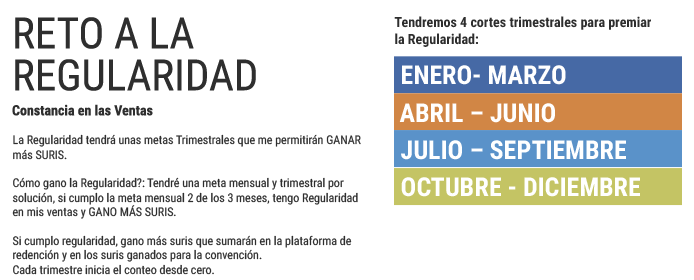
<style>
.page{position:relative;width:694px;height:280px;background:#ffffff}
.page>*{position:absolute;margin:0}
.t1{font:14px/25px "RobotoCondensed-Bold";color:#2a2a2a}
.t2{font:43px/42px "RobotoCondensed-Regular";color:#2a2a2a;text-transform:uppercase}
.t3{font:14px "RobotoCondensed-Bold";color:#2a2a2a}
.t4{font:26px "RobotoCondensed-Bold";color:#ffffff;text-transform:uppercase}
.t5{font:12px "RobotoCondensed-Regular";color:#2a2a2a}
</style>
<div class="page">
<p class="t1" style="left:12px;top:17px;width:244px;height:99px"><span class="t2">reto a la regularidad <br></span>Constancia en las Ventas</p>
<p class="t3" style="left:394px;top:16px;width:257px;height:31px">Tendremos 4 cortes trimestrales para premiar <br>la Regularidad:</p>
<p class="t4" style="left:402px;top:65px;width:164px;height:20px">Enero- Marzo</p>
<p class="t4" style="left:399px;top:103px;width:156px;height:20px">Abril – Junio</p>
<p class="t5" style="left:12px;top:134px;width:349px;height:141px">La Regularidad tendrá unas metas Trimestrales que me permitirán GANAR más SURIS. <br><br>Cómo gano la Regularidad?: Tendré una meta mensual y trimestral por solución, si cumplo la meta mensual 2 de los 3 meses, tengo Regularidad en mis ventas y GANO MÁS SURIS.<br><br>Si cumplo regularidad, gano más suris que sumarán en la plataforma de redención y en los suris ganados para la convención.<br>Cada trimestre inicia el conteo desde cero.</p>
<p class="t4" style="left:401px;top:140px;width:225px;height:20px">Julio – Septiembre</p>
<p class="t4" style="left:401px;top:177px;width:239px;height:20px">Octubre - Diciembre</p>
</div>
